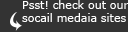
<style>
.page{position:relative;width:128px;height:32px;background:#333333}
.page>*{position:absolute;margin:0}
.t1{font:11px "Verdana";color:#ffffff}
</style>
<div class="page">
<p class="t1" style="left:22px;top:0px;width:107px;height:22px">Psst! check out our <br>socail medaia sites</p>
</div>
